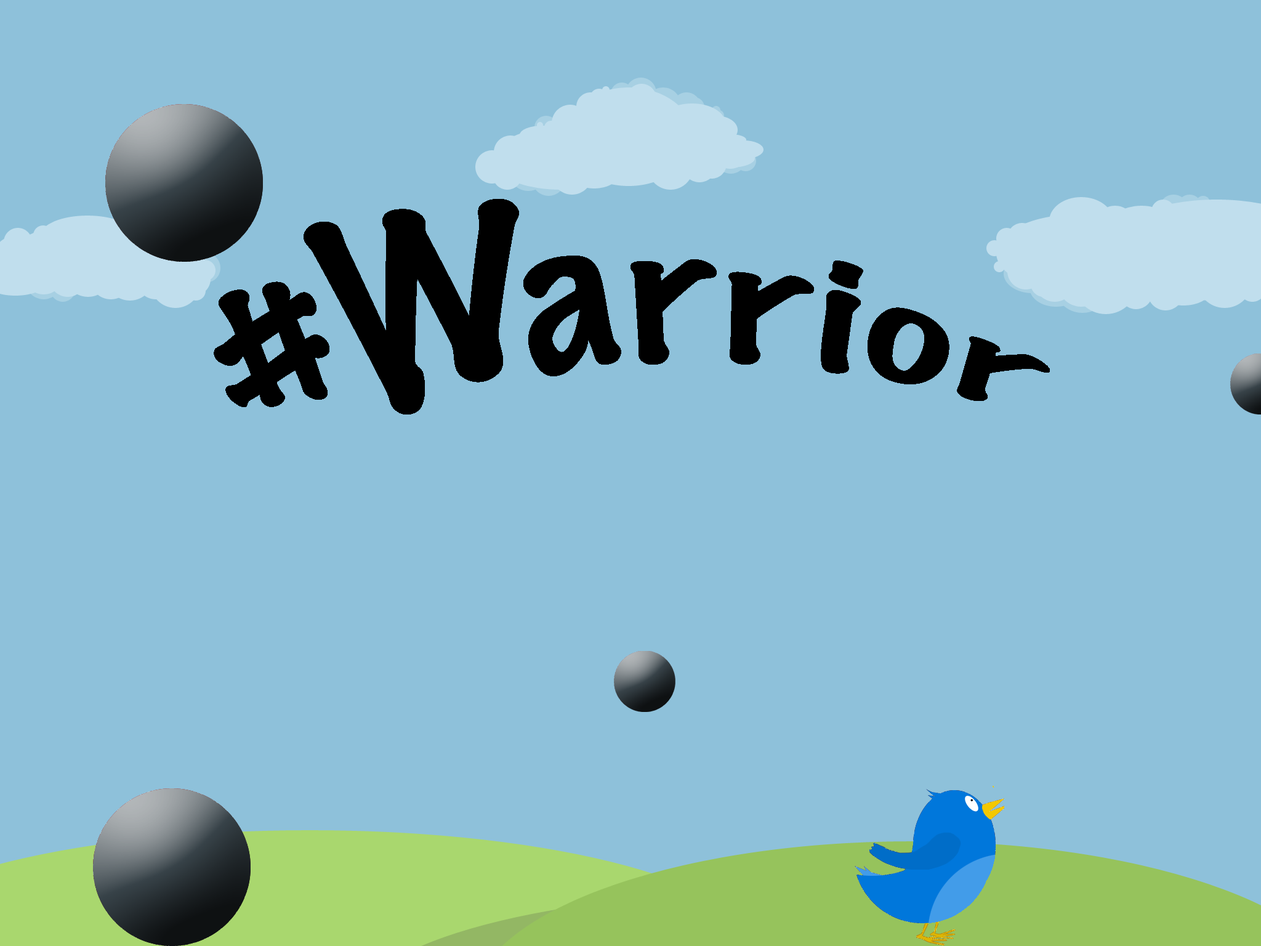
<style>
.page{position:relative;width:1261px;height:946px;background:#8ec1da}
.page>*{position:absolute;margin:0}
.t1{font:184.7px "MarkerFelt-Thin";color:#000000}
</style>
<div class="page">
<p class="t1" style="left:214px;top:199px;width:836px;height:215px">#Warrior</p>
</div>
